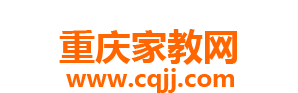
<style>
.page{position:relative;width:298px;height:93px;background:#ffffff}
.page>*{position:absolute;margin:0}
.t1{font:36px "MicrosoftYaHei-Bold";color:#ff6600}
.t2{font:24px "MicrosoftYaHei-Bold";color:#ff6600}
</style>
<div class="page">
<p class="t1" style="left:59px;top:29px;width:178px;height:36px">重庆家教网</p>
<p class="t2" style="left:66px;top:68px;width:168px;height:25px">www.cqjj.com</p>
</div>
